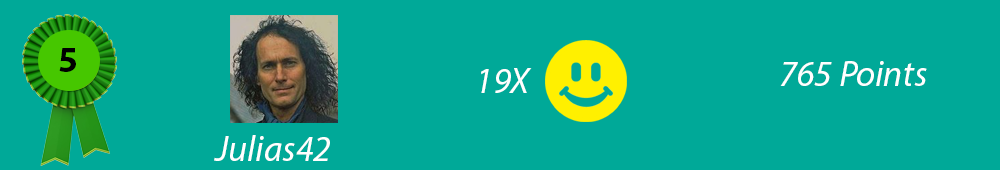
<style>
.page{position:relative;width:1000px;height:170px;background:#00a998}
.page>*{position:absolute;margin:0}
.t1{font:36px "MyriadPro-Bold";color:#000000}
.t2{font:36px "MyriadPro-It";color:#ffffff}
</style>
<div class="page">
<p class="t1" style="left:59px;top:48px;width:17px;height:24px">5</p>
<p class="t2" style="left:780px;top:61px;width:147px;height:25px">765 Points</p>
<p class="t2" style="left:481px;top:68px;width:51px;height:25px">19X</p>
<p class="t2" style="left:214px;top:135px;width:116px;height:26px">Julias42</p>
</div>
